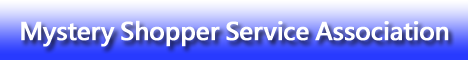
<style>
.page{position:relative;width:468px;height:60px}
.page>*{position:absolute;margin:0}
.t1{font:24px "MicrosoftJhengHeiBold";letter-spacing:-0.025em;color:#ffffff;font-weight:bold}
</style>
<div class="page">
<p class="t1" style="left:21px;top:20px;width:428px;height:27px">Mystery Shopper Service Association</p>
</div>
